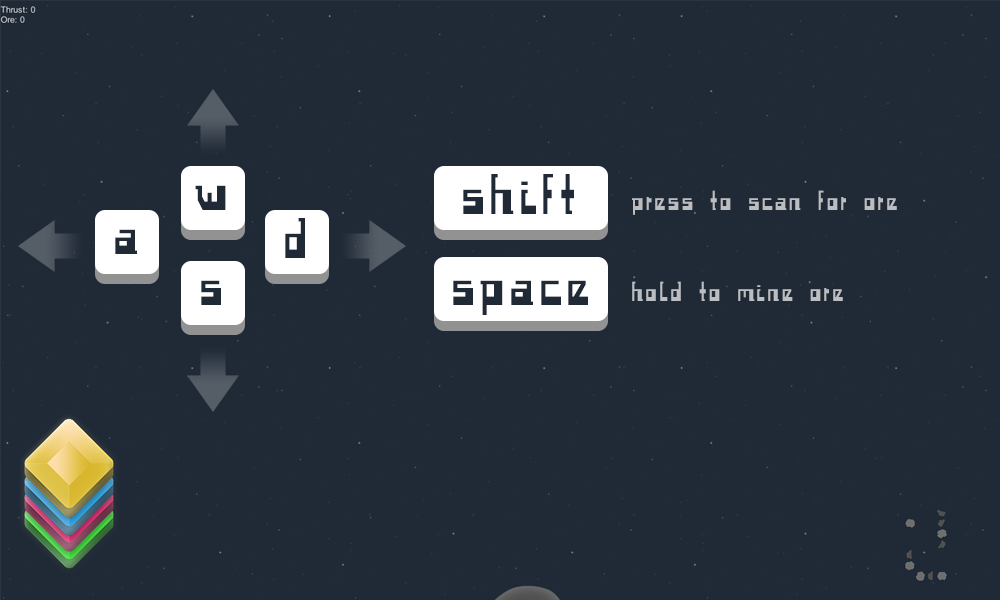
<style>
.page{position:relative;width:1000px;height:600px;background:#202a37}
.page>*{position:absolute;margin:0}
.t1{font:49.9px "Spaceworm";letter-spacing:0.1em;color:#202a37}
.t2{font:24px "Spaceworm";letter-spacing:0.1em;color:#bcbdc0}
</style>
<div class="page">
<p class="t1" style="left:463px;top:174px;width:111px;height:40px">shift</p>
<p class="t1" style="left:195px;top:185px;width:31px;height:25px">w</p>
<p class="t2" style="left:632px;top:190px;width:265px;height:25px">press to scan for ore</p>
<p class="t1" style="left:285px;top:218px;width:20px;height:40px">d</p>
<p class="t1" style="left:115px;top:229px;width:22px;height:25px">a</p>
<p class="t1" style="left:201px;top:280px;width:20px;height:25px">s</p>
<p class="t1" style="left:453px;top:280px;width:135px;height:35px">space</p>
<p class="t2" style="left:632px;top:281px;width:211px;height:20px">hold to mine ore</p>
</div>
